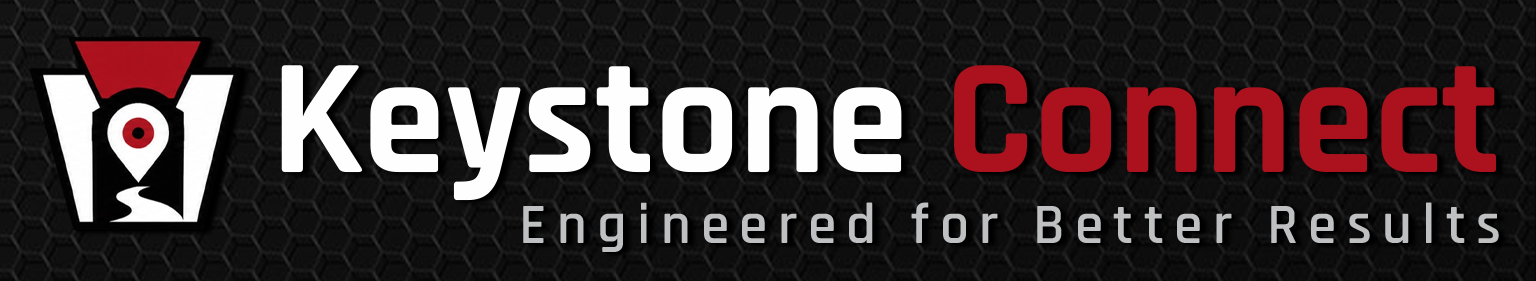
<style>
.page{position:relative;width:1536px;height:281px}
.page>*{position:absolute;margin:0}
.t1{font:166px "Rajdhani-Bold";color:#fefefe}
.t2{font:166px "Rajdhani-Bold";color:#ac121e}
.t3{font:57.4px "Rajdhani-SemiBold";letter-spacing:0.18em;color:#bfc0c1}
</style>
<div class="page">
<p class="t1" style="left:281px;top:65px;width:1215px;height:136px">Keystone <span class="t2">Connect</span></p>
<p class="t3" style="left:523px;top:202px;width:976px;height:50px">Engineered for Better Results</p>
</div>
